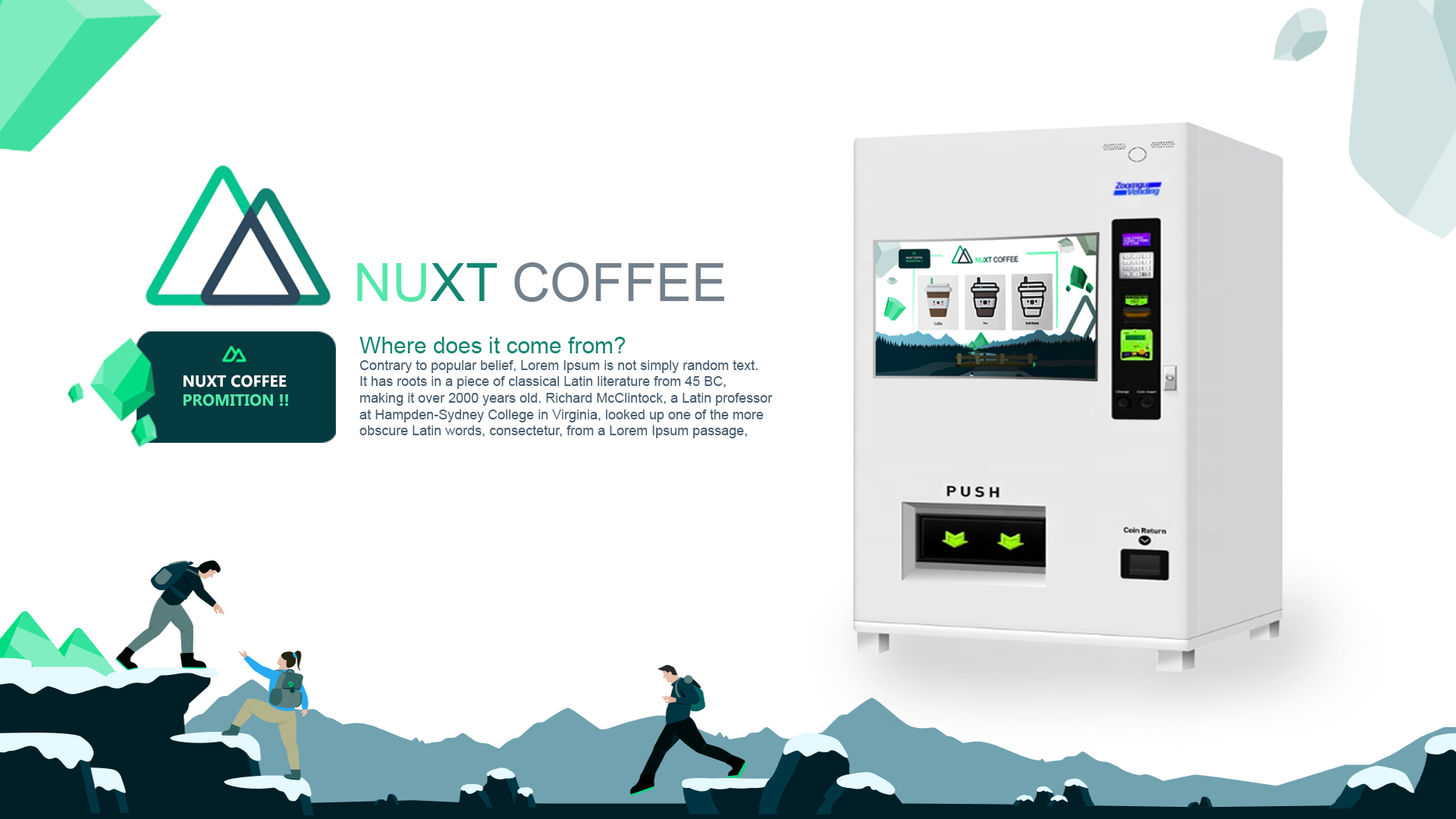
<style>
.page{position:relative;width:1456px;height:819px;background:#ffffff}
.page>*{position:absolute;margin:0}
.t1{font:53.3px "ArialMT";color:#74808b}
.t2{font:53.3px "ArialMT";color:#53e8aa}
.t3{font:53.3px "ArialMT";color:#108773}
.t4{font:13.6px "ArialMT";color:#475d6f}
.t5{font:22.7px "ArialMT";color:#108773}
.t6{font:16px "Gadugi-Bold";color:#53e8aa}
.t7{font:16px "Gadugi-Bold";color:#ffffff}
</style>
<div class="page">
<p class="t1" style="left:357px;top:262px;width:367px;height:40px"><span class="t2">NU</span><span class="t3">XT </span>COFFEE</p>
<p class="t4" style="left:359px;top:337px;width:414px;height:101px"><span class="t5">Where does it come from?<br></span>Contrary to popular belief, Lorem Ipsum is not simply random text. <br>It has roots in a piece of classical Latin literature from 45 BC, <br>making it over 2000 years old. Richard McClintock, a Latin professor <br>at Hampden-Sydney College in Virginia, looked up one of the more<br>obscure Latin words, consectetur, from a Lorem Ipsum passage,</p>
<p class="t6" style="left:184px;top:375px;width:104px;height:31px"><span class="t7">NUXT COFFEE <br></span>PROMITION !!</p>
</div>
